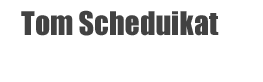
<style>
.page{position:relative;width:263px;height:82px;background:#ffffff}
.page>*{position:absolute;margin:0}
.t1{font:30px "Impact";color:#424242}
</style>
<div class="page">
<p class="t1" style="left:21px;top:10px;width:198px;height:26px">Tom Scheduikat</p>
</div>
